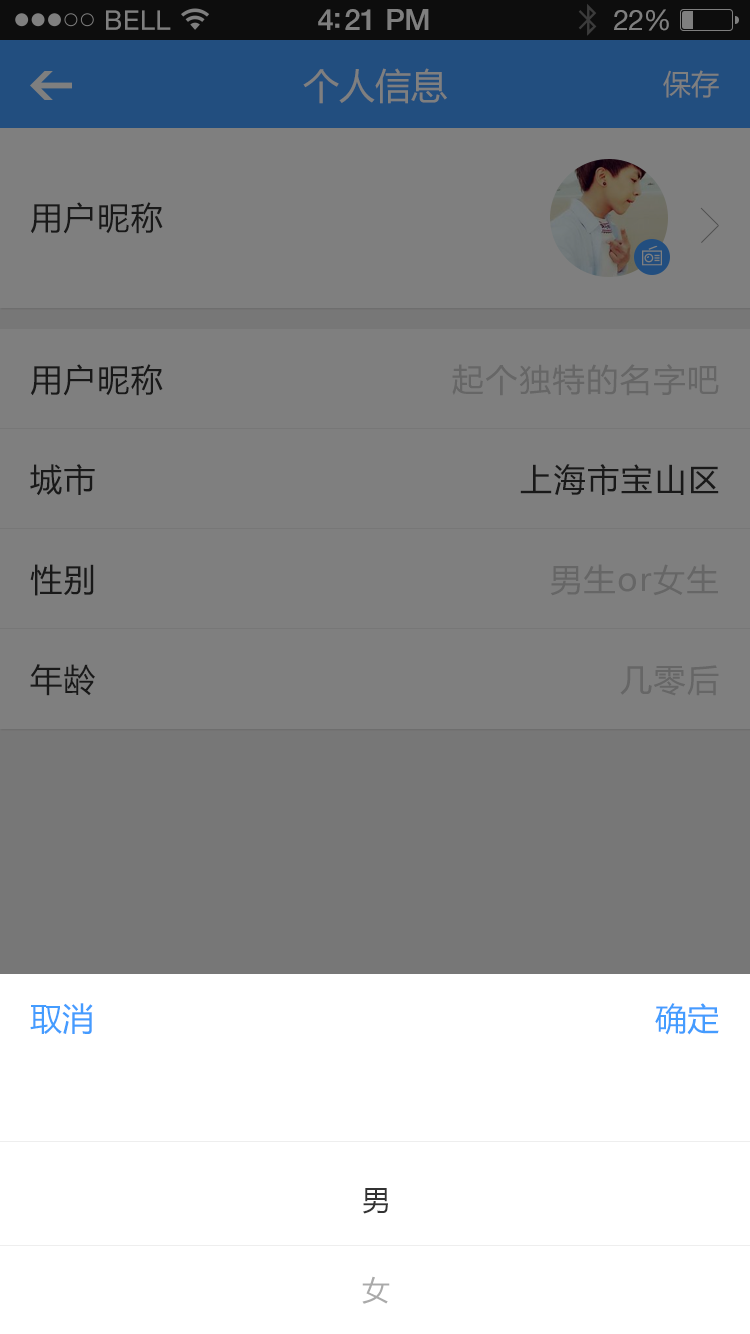
<style>
.page{position:relative;width:750px;height:1334px;background:#7f7f7f}
.page>*{position:absolute;margin:0}
.t1{font:36px "MicrosoftYaHei";color:#7f7f7f}
.t2{font:28px "MicrosoftYaHei";color:#7f7f7f}
.t3{font:32px "MicrosoftYaHei";letter-spacing:0.05em;color:#191919}
.t4{font:32px "MicrosoftYaHei";letter-spacing:0.05em;color:#666666}
.t5{font:32px "MicrosoftYaHei";color:#449cff}
.t6{font:28px "MicrosoftYaHei";color:#333333}
.t7{font:28px "MicrosoftYaHei";color:#aaaaaa}
</style>
<div class="page">
<p class="t1" style="left:303px;top:68px;width:144px;height:36px">个人信息</p>
<p class="t2" style="left:663px;top:70px;width:56px;height:28px">保存</p>
<p class="t3" style="left:30px;top:202px;width:133px;height:32px">用户昵称</p>
<p class="t3" style="left:30px;top:364px;width:133px;height:32px">用户昵称</p>
<p class="t4" style="left:452px;top:364px;width:267px;height:32px">起个独特的名字吧</p>
<p class="t3" style="left:30px;top:464px;width:65px;height:32px">城市</p>
<p class="t3" style="left:520px;top:464px;width:199px;height:31px">上海市宝山区</p>
<p class="t3" style="left:30px;top:564px;width:64px;height:32px">性别</p>
<p class="t4" style="left:550px;top:564px;width:168px;height:32px">男生or女生</p>
<p class="t3" style="left:30px;top:664px;width:65px;height:32px">年龄</p>
<p class="t4" style="left:620px;top:665px;width:99px;height:31px">几零后</p>
<p class="t5" style="left:30px;top:1003px;width:63px;height:31px">取消</p>
<p class="t5" style="left:655px;top:1003px;width:64px;height:32px">确定</p>
<p class="t6" style="left:363px;top:1188px;width:25px;height:26px">男</p>
<p class="t7" style="left:362px;top:1276px;width:28px;height:28px">女</p>
</div>
